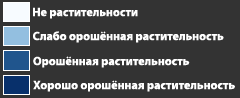
<style>
.page{position:relative;width:240px;height:98px;background:#333333}
.page>*{position:absolute;margin:0}
.t1{font:12px "MyriadPro-Bold";color:#ffffff}
</style>
<div class="page">
<p class="t1" style="left:33px;top:7px;width:105px;height:12px">Не растительности</p>
<p class="t1" style="left:33px;top:31px;width:191px;height:12px">Слабо орошённая растительность</p>
<p class="t1" style="left:33px;top:56px;width:157px;height:12px">Орошённая растительность</p>
<p class="t1" style="left:33px;top:80px;width:202px;height:12px">Хорошо орошённая растительность</p>
</div>
